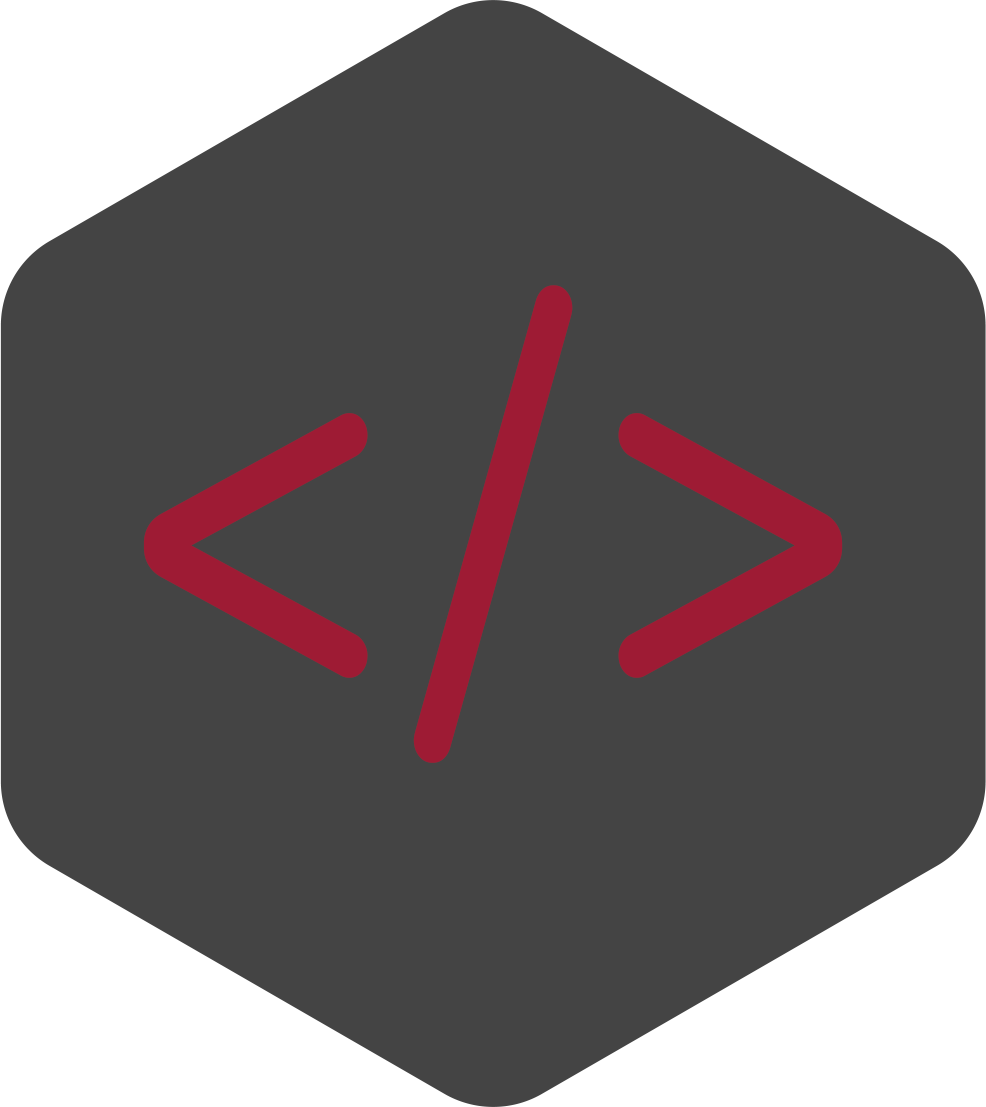
<style>
.page{position:relative;width:986px;height:1107px;background:#444444}
.page>*{position:absolute;margin:0}
.t1{font:555.9px "VarelaRound-Regular";color:#9e1b34;scale:0.82 1}
</style>
<div class="page">
<p class="t1" style="left:143px;top:285px;width:700px;height:478px">&lt;/&gt;</p>
</div>
